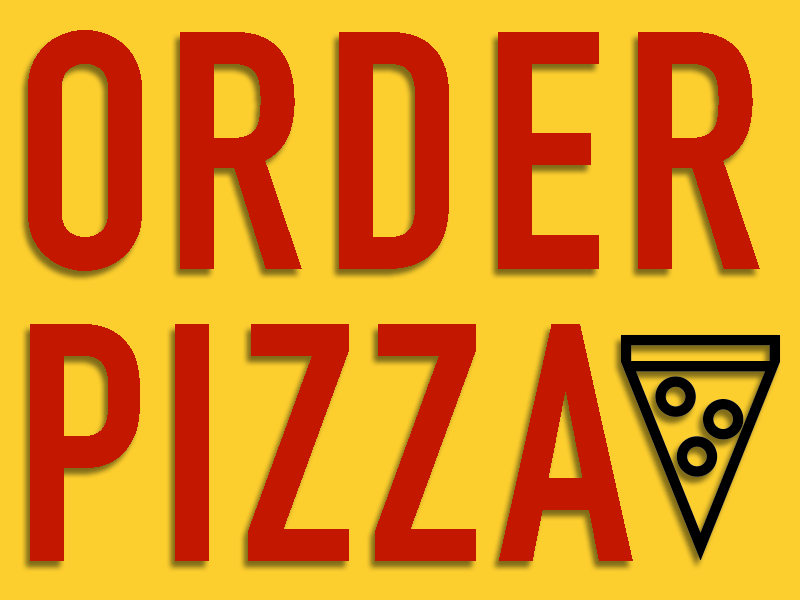
<style>
.page{position:relative;width:800px;height:600px;background:#fcce2e}
.page>*{position:absolute;margin:0}
.t1{font:333.3px/291.2px "DINCondensed-Bold";letter-spacing:0.05em;color:#c41700}
</style>
<div class="page">
<p class="t1" style="left:28px;top:30px;width:732px;height:531px">ORDER<br>PIZZA</p>
</div>
